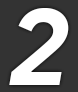
<style>
.page{position:relative;width:78px;height:92px;background:#333333}
.page>*{position:absolute;margin:0}
.t1{font:109.6px "ProductSans-BoldItalic";color:#ffffff}
</style>
<div class="page">
<p class="t1" style="left:9px;top:8px;width:60px;height:77px">2</p>
</div>
